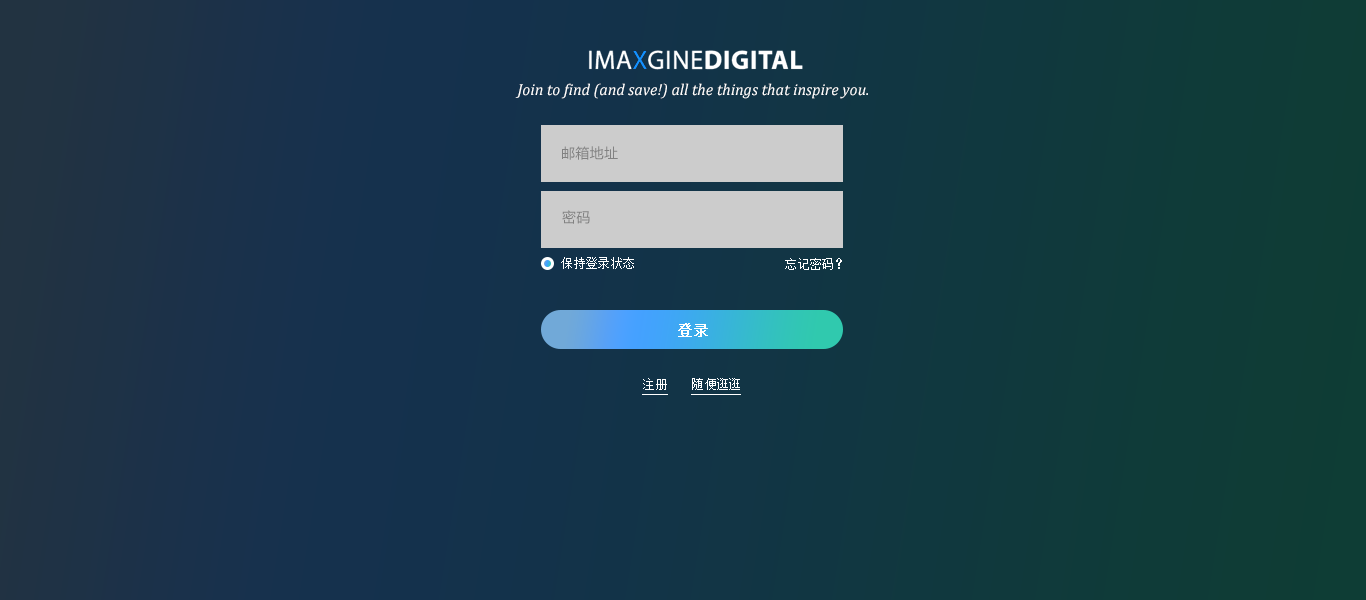
<style>
.page{position:relative;width:1366px;height:600px}
.page>*{position:absolute;margin:0}
.t1{font:16px "Cambria-Italic";color:#ffffff}
.t2{font:14px "MicrosoftYaHei";letter-spacing:0.025em;color:#818181}
.t3{font:12px "SimSun";letter-spacing:0.025em;color:#ffffff}
.t4{font:14px "SimSun";letter-spacing:0.025em;color:#ffffff;font-weight:bold}
</style>
<div class="page">
<p class="t1" style="left:515px;top:83px;width:353px;height:16px">Join to find (and save!) all the things that inspire you.</p>
<p class="t2" style="left:562px;top:146px;width:56px;height:14px">邮箱地址</p>
<p class="t2" style="left:562px;top:210px;width:28px;height:14px">密码</p>
<p class="t3" style="left:561px;top:257px;width:73px;height:12px">保持登录状态</p>
<p class="t3" style="left:785px;top:258px;width:57px;height:12px">忘记密码？</p>
<p class="t4" style="left:678px;top:323px;width:30px;height:14px">登录</p>
<p class="t3" style="left:643px;top:378px;width:24px;height:12px">注册</p>
<p class="t3" style="left:692px;top:378px;width:48px;height:12px">随便逛逛</p>
</div>
